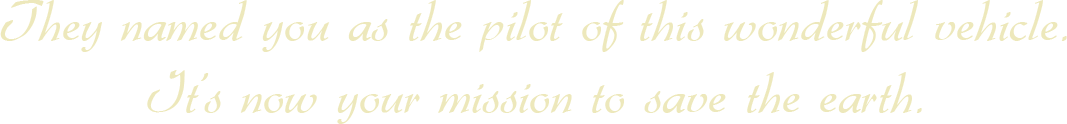
<style>
.page{position:relative;width:1067px;height:124px;background:#ffffff}
.page>*{position:absolute;margin:0}
.t1{font:60px "Gabrielle";color:#ede8bb}
</style>
<div class="page">
<p class="t1" style="left:0px;top:0px;width:1067px;height:124px;text-align:center">They named you as the pilot of this wonderful vehicle.<br>It's now your mission to save the earth.</p>
</div>
